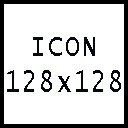
<style>
.page{position:relative;width:128px;height:128px;background:#ffffff}
.page>*{position:absolute;margin:0}
.t1{font:30px "LucidaConsole";letter-spacing:0.08em;color:#050812;scale:0.84 1}
</style>
<div class="page">
<p class="t1" style="left:7px;top:37px;width:114px;height:55px;text-align:center">ICON<br>128x128</p>
</div>
